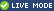
<style>
.page{position:relative;width:54px;height:11px}
.page>*{position:absolute;margin:0}
.t1{font:8px "04b03";color:#ffffff;text-transform:uppercase}
</style>
<div class="page">
<p class="t1" style="left:12px;top:3px;width:40px;height:5px">LIVE MODE</p>
</div>
